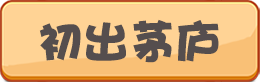
<style>
.page{position:relative;width:260px;height:82px;background:#ffd395}
.page>*{position:absolute;margin:0}
.t1{font:46px "DFHaiBaoW12";color:#554e4e}
</style>
<div class="page">
<p class="t1" style="left:39px;top:19px;width:180px;height:44px">初出茅庐</p>
</div>
